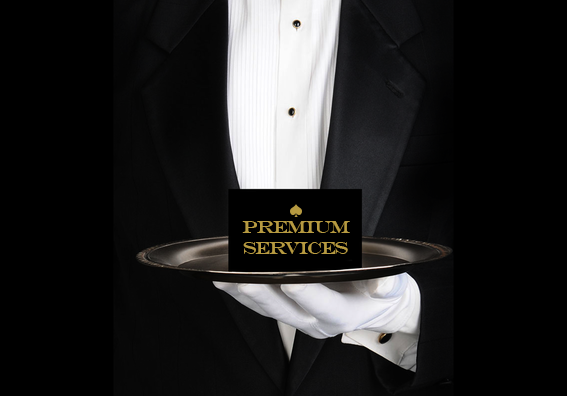
<style>
.page{position:relative;width:567px;height:396px;background:#000000}
.page>*{position:absolute;margin:0}
.t1{font:18px "EngraversMT";letter-spacing:-0.075em;color:#b69a41}
</style>
<div class="page">
<p class="t1" style="left:242px;top:221px;width:108px;height:33px">Premium <br>Services</p>
</div>
